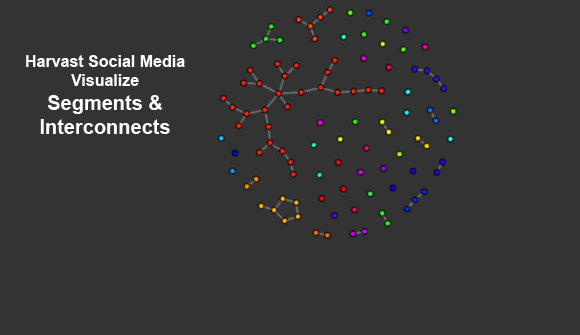
<style>
.page{position:relative;width:580px;height:335px;background:#333333}
.page>*{position:absolute;margin:0}
.t1{font:16px "Arial-BoldMT";color:#ffffff}
.t2{font:20px "Arial-BoldMT";color:#ffffff}
</style>
<div class="page">
<p class="t1" style="left:26px;top:55px;width:159px;height:79px;text-align:center">Harvast Social Media<br>Visualize<br><span class="t2">Segments &amp;<br>Interconnects</span></p>
</div>
